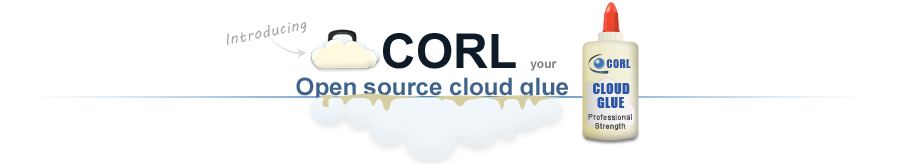
<style>
.page{position:relative;width:900px;height:164px;background:#ffffff}
.page>*{position:absolute;margin:0}
.t1{font:15px "MVBoli";letter-spacing:0.04em;color:#a6a6a6}
.t2{font:48px "Arial-BoldMT";color:#0e1b27}
.t3{font:12px "Arial-BoldMT";color:#808080}
.t4{font:11.1px "Impact";letter-spacing:0.04em;color:#2b56a6}
.t5{font:24px "Arial-BoldMT";color:#3e648b}
.t6{font:13.5px "Impact";letter-spacing:0.04em;color:#2b56a6}
.t7{font:7.4px "ArialMT";letter-spacing:0.04em;color:#424447}
</style>
<div class="page">
<p class="t1" style="left:227px;top:22px;width:79px;height:23px;rotate:-12deg">Introducing</p>
<p class="t2" style="left:383px;top:33px;width:174px;height:38px">CORL <span class="t3">your</span></p>
<p class="t4" style="left:606px;top:59px;width:25px;height:9px">CORL</p>
<p class="t5" style="left:296px;top:77px;width:272px;height:23px">Open source cloud glue</p>
<p class="t6" style="left:593px;top:83px;width:37px;height:11px">CLOUD</p>
<p class="t6" style="left:597px;top:97px;width:28px;height:11px">GLUE</p>
<p class="t7" style="left:588px;top:114px;width:44px;height:17px;text-align:center">Professional Strength</p>
</div>
